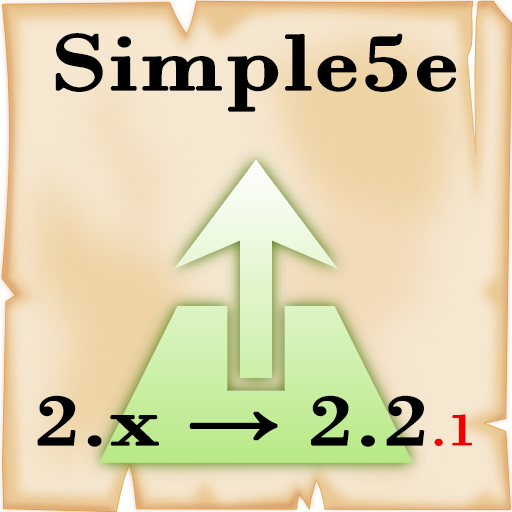
<style>
.page{position:relative;width:512px;height:512px}
.page>*{position:absolute;margin:0}
.t1{font:82px "BodoniMT";color:#000000;font-weight:bold;scale:1.25 1}
.t2{font:74px "BodoniMT";color:#000000;font-weight:bold;scale:1.25 1}
.t3{font:74px "BookAntiqua";color:#000000;font-weight:bold;scale:1.25 1}
.t4{font:46px "BodoniMT";color:#f20000;font-weight:bold;scale:1.25 1}
</style>
<div class="page">
<p class="t1" style="left:37px;top:33px;width:435px;height:414px;text-align:center">Simple5e<br><span class="t2"><br><br><br>2.x </span><span class="t3">→</span><span class="t2"> 2.2</span><span class="t4">.1</span></p>
</div>
